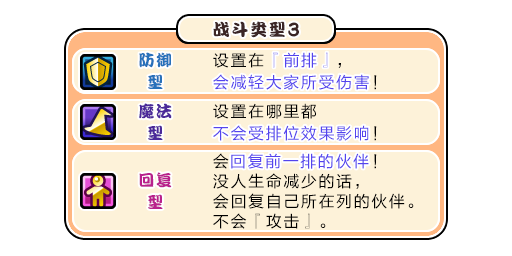
<style>
.page{position:relative;width:512px;height:256px;background:#ffffff}
.page>*{position:absolute;margin:0}
.t1{font:17px "DFPKanTingLiuW9";letter-spacing:0.1em;color:#3b2626}
.t2{font:20.4px "DFPKanTingLiuW9";letter-spacing:0.1em;color:#3b2626;scale:0.83 1}
.t3{font:16px/22px "DFPKanTingLiuW9";letter-spacing:0.1em;color:#2871ba}
.t4{font:16px/22px "FZLTHJW--GB1-0";letter-spacing:0.1em;color:#5444ed}
.t5{font:16px/22px "FZLTHJW--GB1-0";letter-spacing:0.1em;color:#000000}
.t6{font:16px "FZLTHJW--GB1-0";letter-spacing:0.1em;color:#5444ed}
.t7{font:16px/22px "DFPKanTingLiuW9";letter-spacing:0.1em;color:#4b2999}
.t8{font:16px/20px "FZLTHJW--GB1-0";letter-spacing:0.1em;color:#000000}
.t9{font:16px/20px "FZLTHJW--GB1-0";letter-spacing:0.1em;color:#5444ed}
.t10{font:16px/22px "DFPKanTingLiuW9";letter-spacing:0.1em;color:#b9218c}
</style>
<div class="page">
<p class="t1" style="left:213px;top:21px;width:86px;height:17px">战斗类型<span class="t2">3</span></p>
<p class="t3" style="left:139px;top:52px;width:32px;height:37px;text-align:center">防御<br>型</p>
<p class="t4" style="left:213px;top:52px;width:164px;height:38px"><span class="t5">设置在</span>『前排』<span class="t5">，<br></span>会减轻大家所受伤害<span class="t5">！</span></p>
<p class="t6" style="left:273px;top:52px;width:55px;height:16px">『前排』</p>
<p class="t6" style="left:213px;top:74px;width:156px;height:16px">会减轻大家所受伤害</p>
<p class="t7" style="left:139px;top:103px;width:33px;height:37px;text-align:center">魔法<br>型</p>
<p class="t4" style="left:213px;top:103px;width:164px;height:38px"><span class="t5">设置在哪里都<br></span>不会受排位效果影响<span class="t5">！</span></p>
<p class="t6" style="left:213px;top:125px;width:156px;height:16px">不会受排位效果影响</p>
<p class="t8" style="left:213px;top:153px;width:201px;height:76px">会<span class="t9">回复前一排的伙伴</span>！<br>没人生命减少的话，<br>会回复自己所在列的伙伴。<br>不会『攻击』。</p>
<p class="t6" style="left:231px;top:153px;width:138px;height:16px">回复前一排的伙伴</p>
<p class="t10" style="left:139px;top:172px;width:33px;height:37px;text-align:center">回复<br>型</p>
</div>
